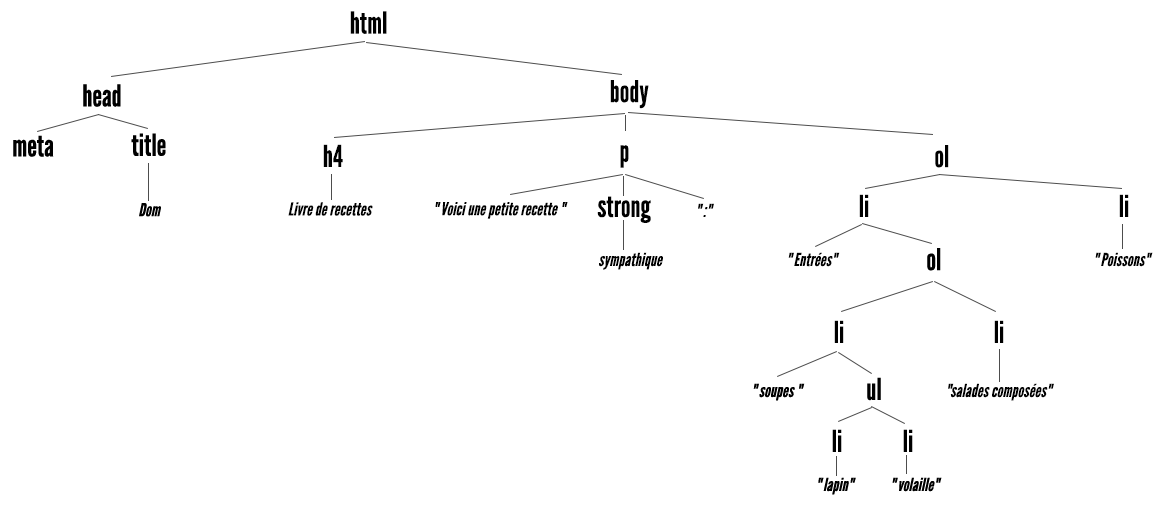
<style>
.page{position:relative;width:1172px;height:509px;background:#ffffff}
.page>*{position:absolute;margin:0}
.t1{font:30px "LeagueGothic-Regular";color:#000000}
.t2{font:18px "LeagueGothic-Italic";color:#000000}
</style>
<div class="page">
<p class="t1" style="left:350px;top:11px;width:37px;height:23px">html</p>
<p class="t1" style="left:610px;top:80px;width:39px;height:29px">body</p>
<p class="t1" style="left:323px;top:144px;width:20px;height:23px">h4</p>
<p class="t1" style="left:620px;top:145px;width:9px;height:23px">p</p>
<p class="t1" style="left:935px;top:145px;width:14px;height:23px">ol</p>
<p class="t1" style="left:597px;top:196px;width:54px;height:27px">strong</p>
<p class="t1" style="left:859px;top:194px;width:10px;height:23px">li</p>
<p class="t1" style="left:1119px;top:194px;width:10px;height:23px">li</p>
<p class="t2" style="left:288px;top:202px;width:85px;height:14px">Livre de recettes</p>
<p class="t2" style="left:435px;top:202px;width:133px;height:17px">" Voici une petite recette "</p>
<p class="t2" style="left:698px;top:203px;width:16px;height:14px">" :"</p>
<p class="t2" style="left:599px;top:252px;width:64px;height:18px">sympathique</p>
<p class="t2" style="left:788px;top:252px;width:52px;height:15px">" Entrées"</p>
<p class="t2" style="left:1095px;top:252px;width:58px;height:15px">" Poissons"</p>
<p class="t1" style="left:834px;top:320px;width:10px;height:23px">li</p>
<p class="t1" style="left:994px;top:320px;width:10px;height:23px">li</p>
<p class="t2" style="left:948px;top:383px;width:106px;height:18px">"salades composées"</p>
</div>
